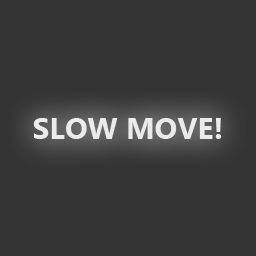
<style>
.page{position:relative;width:256px;height:256px;background:#333333}
.page>*{position:absolute;margin:0}
.t1{font:30px "MicrosoftTaiLe-Bold";color:#ebebeb}
</style>
<div class="page">
<p class="t1" style="left:33px;top:118px;width:189px;height:21px">SLOW MOVE!</p>
</div>
